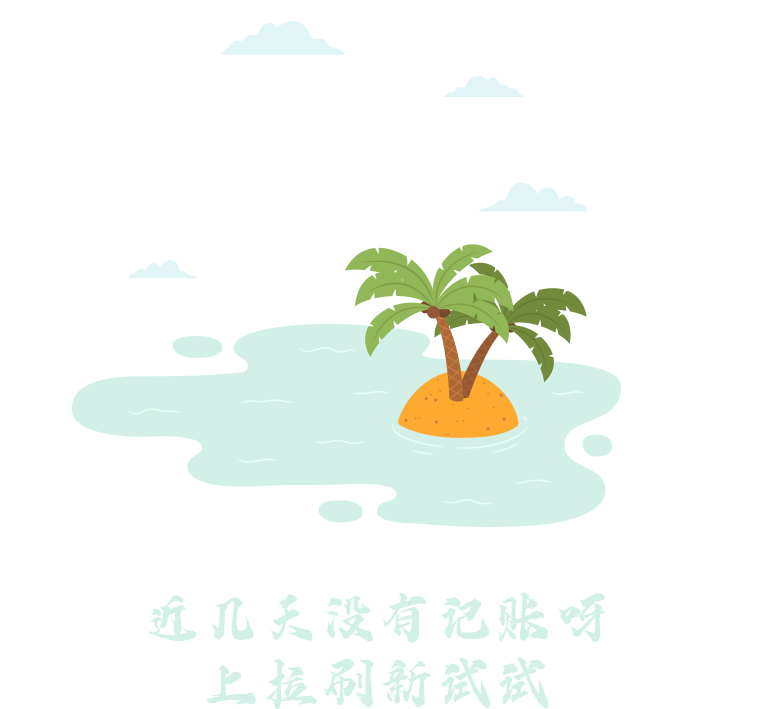
<style>
.page{position:relative;width:759px;height:709px;background:#ffffff}
.page>*{position:absolute;margin:0}
.t1{font:58.5px "iFontshangtiantengfeiti";color:#d2f0e8}
</style>
<div class="page">
<p class="t1" style="left:149px;top:592px;width:457px;height:118px;text-align:center">近几天没有记账呀<br>上拉刷新试试</p>
</div>
